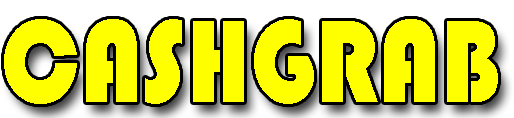
<style>
.page{position:relative;width:514px;height:118px;background:#ffff00}
.page>*{position:absolute;margin:0}
.t1{font:121.8px "Bauhaus93";color:#ffff00;scale:0.86 1}
</style>
<div class="page">
<p class="t1" style="left:4px;top:19px;width:494px;height:85px">CASHGRAB</p>
</div>
